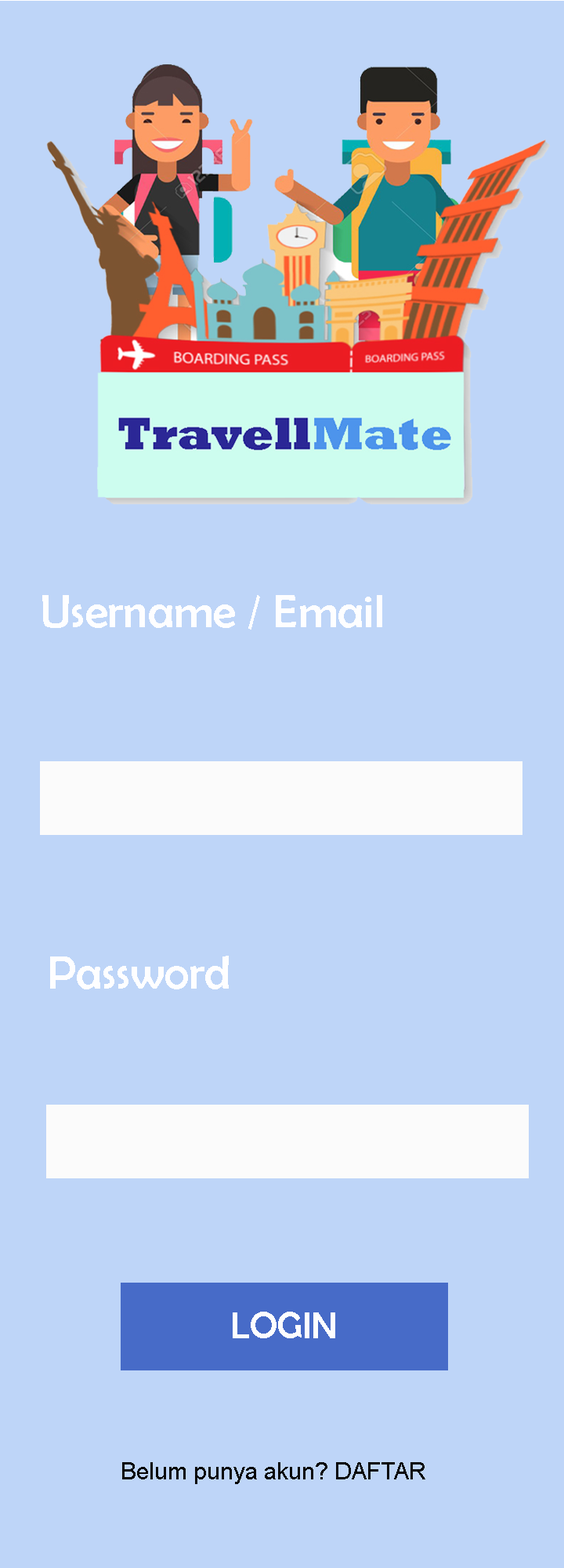
<style>
.page{position:relative;width:564px;height:1568px;background:#bed5f8}
.page>*{position:absolute;margin:0}
.t1{font:47px "BerlinSansFB-Reg";color:#fefeff}
.t2{font:37.6px "BerlinSansFB-Reg";color:#fdfdfe}
.t3{font:23.5px "ArialMT";color:#090909}
</style>
<div class="page">
<p class="t1" style="left:42px;top:595px;width:341px;height:35px">Username / Email</p>
<p class="t1" style="left:50px;top:956px;width:179px;height:33px">Password</p>
<p class="t2" style="left:233px;top:1312px;width:103px;height:26px">LOGIN</p>
<p class="t3" style="left:122px;top:1462px;width:304px;height:22px">Belum punya akun? DAFTAR</p>
</div>
